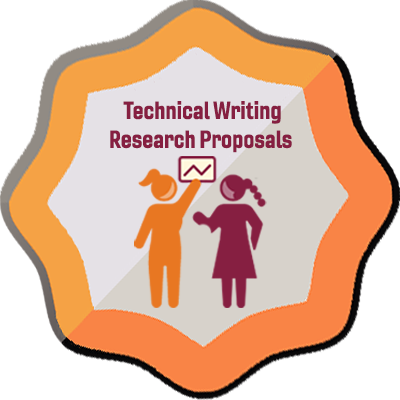
<style>
.page{position:relative;width:400px;height:400px;background:#ffffff}
.page>*{position:absolute;margin:0}
.t1{font:24px "Gineso-ConBol";color:#861f41}
</style>
<div class="page">
<p class="t1" style="left:110px;top:101px;width:182px;height:52px;text-align:center">Technical Writing<br>Research Proposals</p>
</div>
